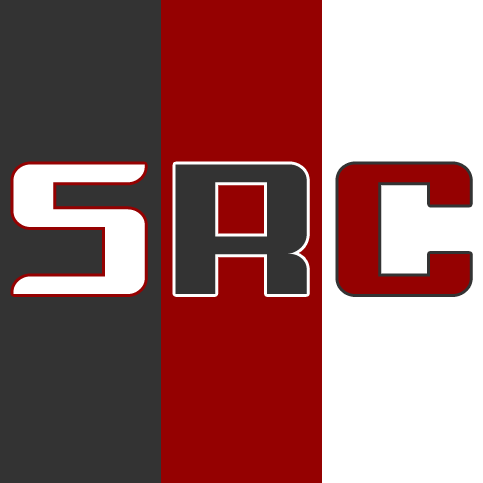
<style>
.page{position:relative;width:483px;height:483px;background:#333333}
.page>*{position:absolute;margin:0}
.t1{font:215.6px "Krunch-Bold";color:#ffffff;scale:1.11 1}
.t2{font:215.6px "Krunch-Bold";color:#333333;scale:1.11 1}
.t3{font:215.6px "Krunch-Bold";color:#950101;scale:1.11 1}
</style>
<div class="page">
<p class="t1" style="left:13px;top:164px;width:132px;height:130px">S</p>
<p class="t2" style="left:175px;top:164px;width:132px;height:130px">R</p>
<p class="t3" style="left:338px;top:164px;width:132px;height:130px">C</p>
</div>
